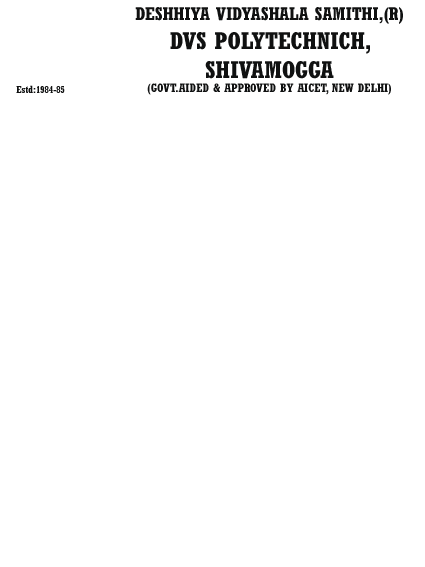
<style>
.page{position:relative;width:425px;height:567px;background:#ffffff}
.page>*{position:absolute;margin:0}
.t1{font:12px "Rockwell-CondensedBold";color:#101111}
.t2{font:18px "Rockwell-CondensedBold";color:#101111}
.t3{font:24px "Rockwell-CondensedBold";color:#101111}
</style>
<div class="page">
<p class="t1" style="left:135px;top:7px;width:268px;height:88px;text-align:center"><span class="t2">DESHHIYA VIDYASHALA SAMITHI,(R)<br></span><span class="t3">DVS POLYTECHNICH,<br>SHIVAMOGGA<br></span>(GOVT.AIDED &amp; APPROVED BY AICET, NEW DELHI)</p>
</div>
